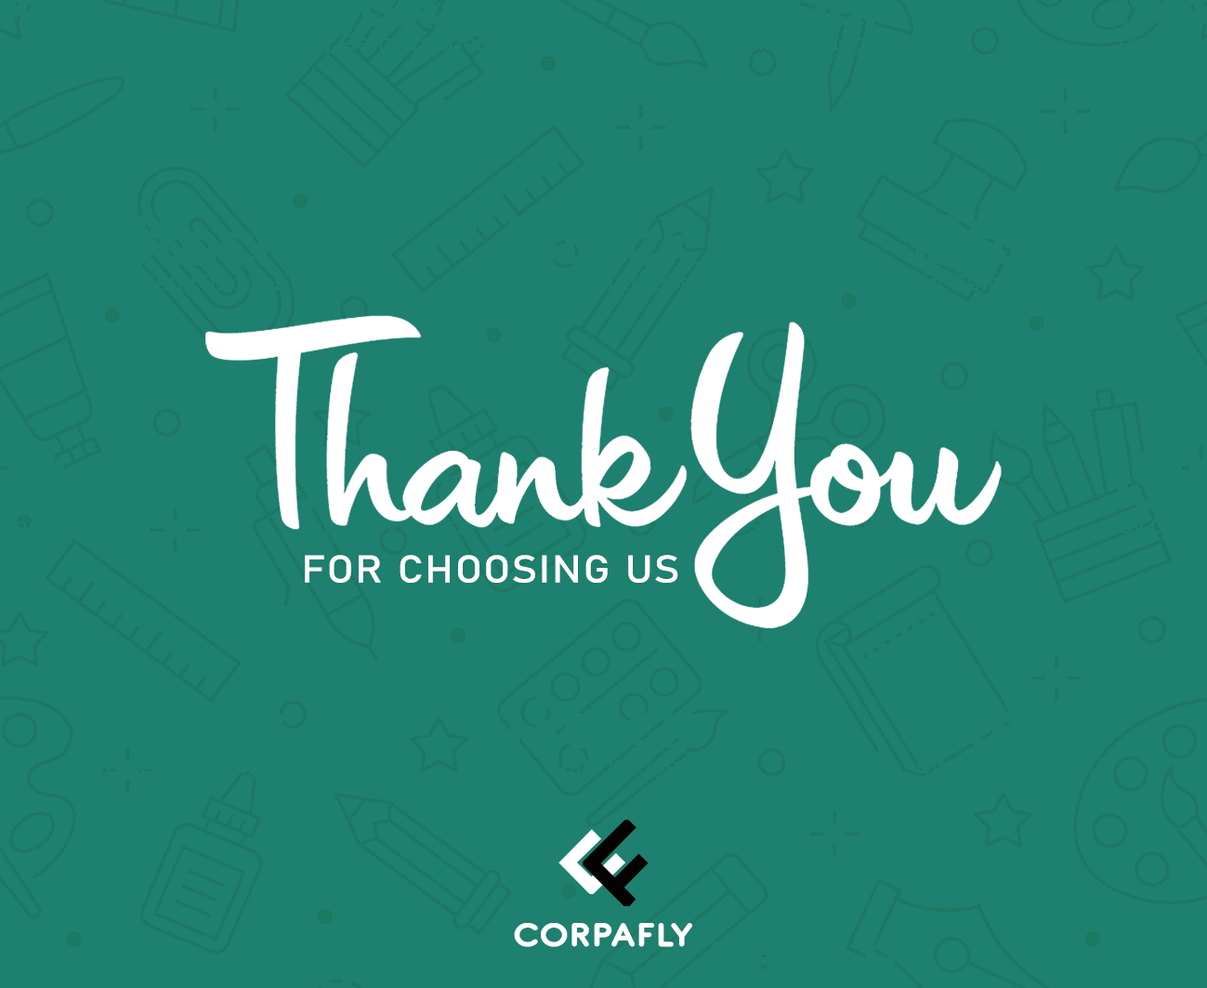
<style>
.page{position:relative;width:1207px;height:988px;background:#1e806f}
.page>*{position:absolute;margin:0}
.t1{font:38px "Bahnschrift";letter-spacing:0.04em;color:#ffffff;font-weight:bold;scale:1.11 1}
.t2{font:34.8px "AntipastoPro-DemiBold";letter-spacing:0.04em;color:#ffffff;font-weight:bold;scale:1.11 1}
</style>
<div class="page">
<p class="t1" style="left:305px;top:555px;width:373px;height:28px">FOR CHOOSING US</p>
<p class="t2" style="left:514px;top:923px;width:178px;height:24px">CORPAFLY</p>
</div>
